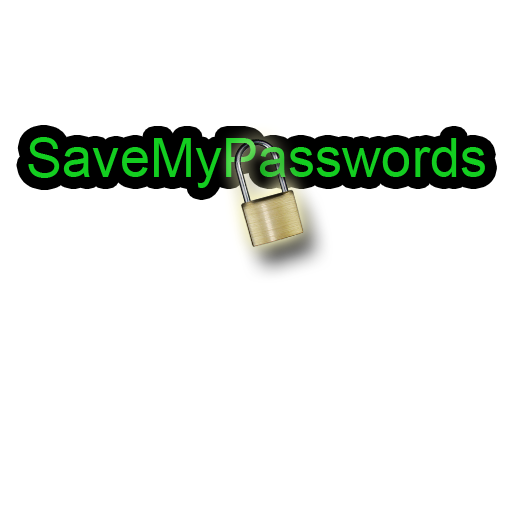
<style>
.page{position:relative;width:512px;height:512px;background:#ffffff}
.page>*{position:absolute;margin:0}
.t1{font:54.2px "ArialMT";color:#13ce20}
</style>
<div class="page">
<p class="t1" style="left:28px;top:137px;width:457px;height:51px">SaveMyPasswords</p>
</div>
